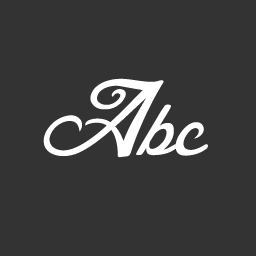
<style>
.page{position:relative;width:256px;height:256px;background:#333333}
.page>*{position:absolute;margin:0}
.t1{font:139.1px "BlessedDay";color:#ffffff}
</style>
<div class="page">
<p class="t1" style="left:43px;top:78px;width:165px;height:80px">Abc</p>
</div>
